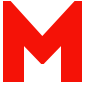
<style>
.page{position:relative;width:86px;height:86px;background:#f51207}
.page>*{position:absolute;margin:0}
.t1{font:115px "Intro";letter-spacing:0.1em;color:#f51207}
</style>
<div class="page">
<p class="t1" style="left:3px;top:1px;width:79px;height:81px">M</p>
</div>
